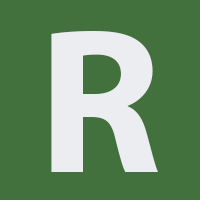
<style>
.page{position:relative;width:200px;height:200px;background:#42713e}
.page>*{position:absolute;margin:0}
.t1{font:208.3px "MyriadPro-Bold";color:#ecedf1}
</style>
<div class="page">
<p class="t1" style="left:51px;top:31px;width:107px;height:141px">R</p>
</div>
